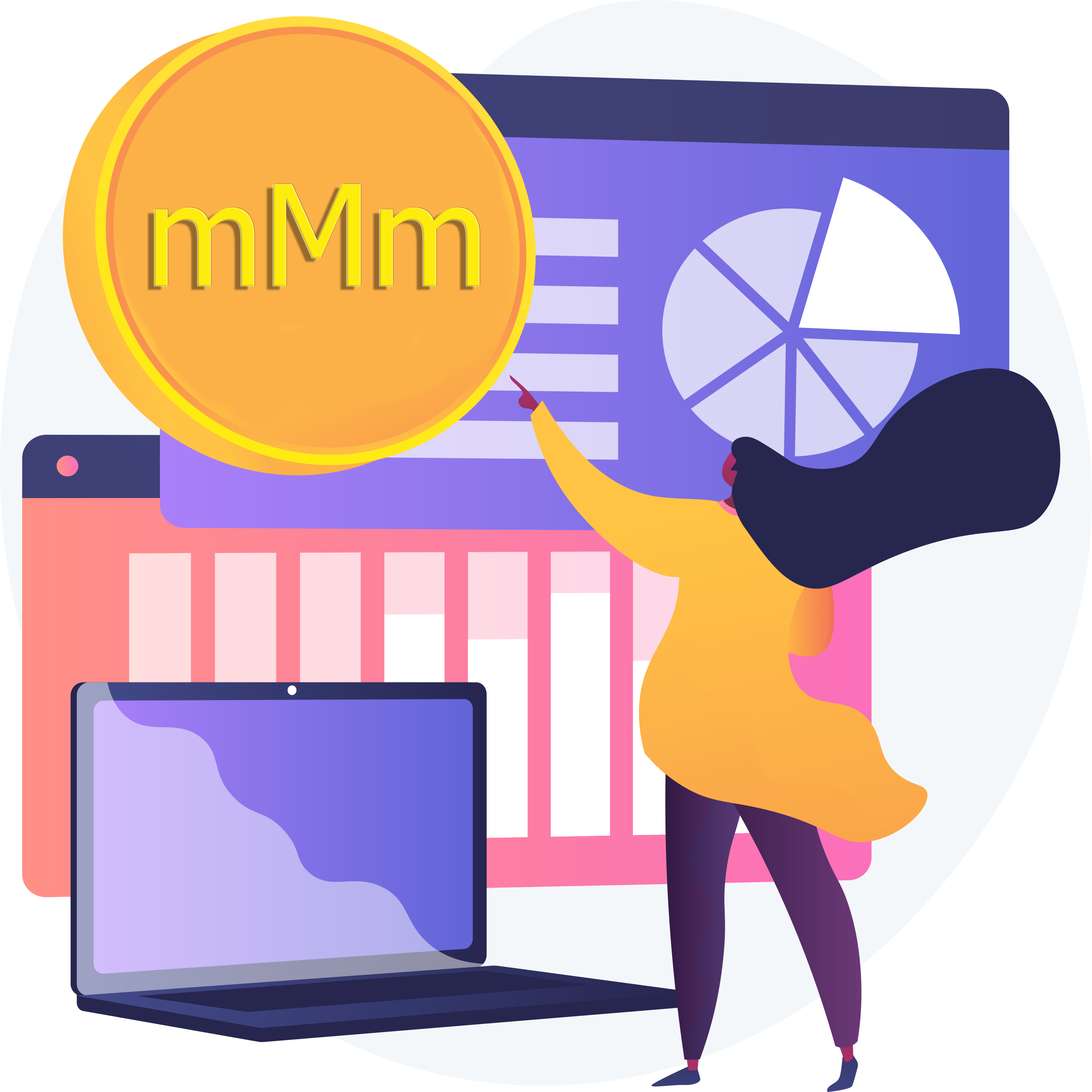
<style>
.page{position:relative;width:1092px;height:1092px;background:#ffffff}
.page>*{position:absolute;margin:0}
.t1{font:140px "Tahoma";color:#feec0e}
</style>
<div class="page">
<p class="t1" style="left:154px;top:184px;width:326px;height:102px">mMm</p>
</div>
